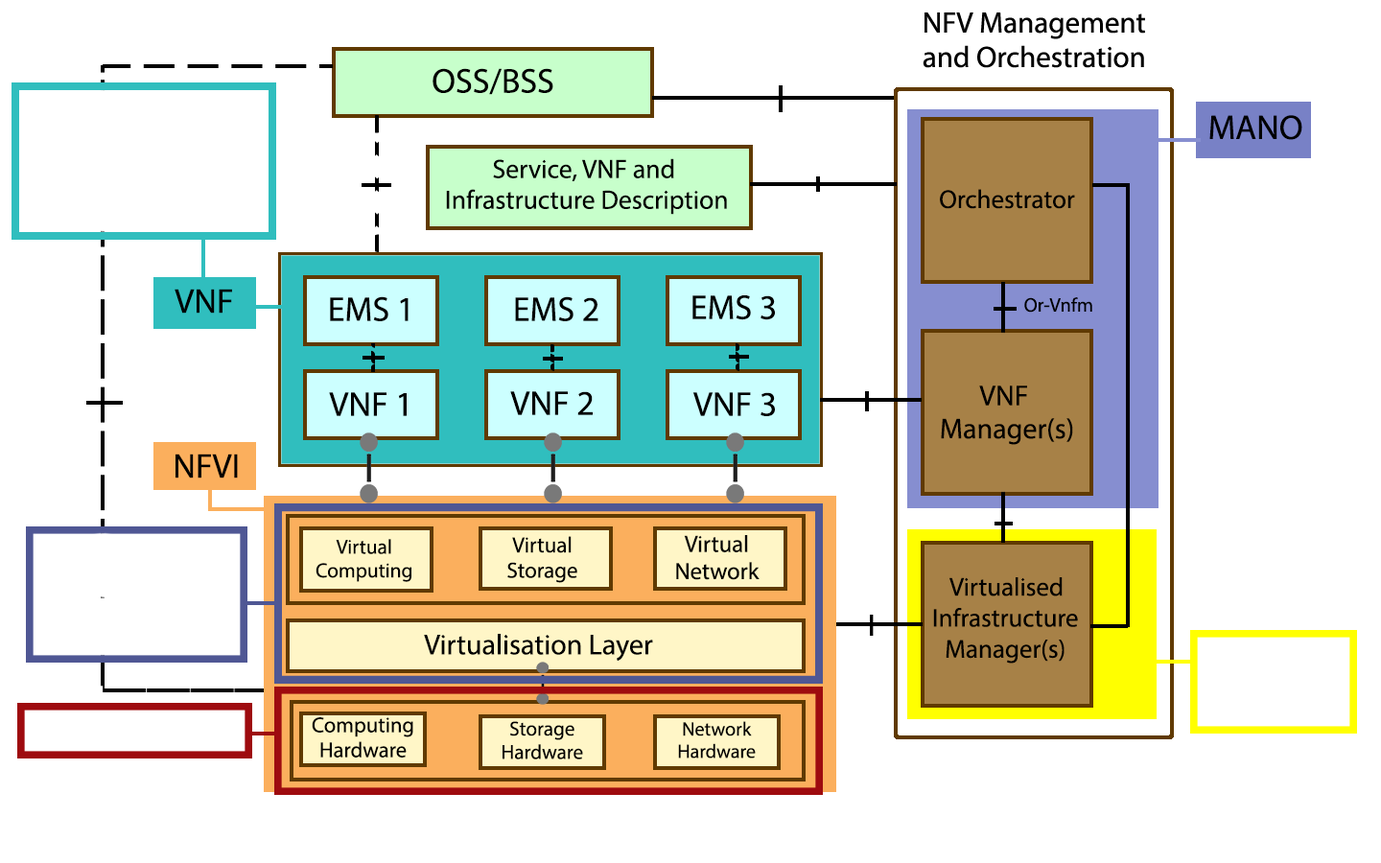
<style>
.page{position:relative;width:1381px;height:863px;background:#ffffff}
.page>*{position:absolute;margin:0}
.t1{font:29.7px "MyriadPro-Regular";color:#000000}
.t2{font:34.5px "MyriadPro-Regular";color:#000000}
.t3{font:26.5px "MyriadPro-Regular";color:#000000}
.t4{font:25.9px "MyriadPro-Regular";color:#000000}
.t5{font:19.7px "MyriadPro-Regular";color:#000000}
.t6{font:28.8px "MyriadPro-Regular";color:#000000}
.t7{font:20.5px "MyriadPro-Regular";color:#000000}
.t8{font:22px "MyriadPro-Regular";color:#000000}
.t9{font:23.6px "MyriadPro-Regular";color:#000000}
.t10{font:25.8px "MyriadPro-Regular";color:#000000}
.t11{font:21.6px "MyriadPro-Regular";color:#000000}
.t12{font:20.3px "MyriadPro-Regular";color:#000000}
.t13{font:19.3px "MyriadPro-Regular";color:#000000}
</style>
<div class="page">
<p class="t1" style="left:923px;top:12px;width:222px;height:56px;text-align:center">NFV Management<br>and Orchestration</p>
<p class="t2" style="left:433px;top:68px;width:120px;height:27px">OSS/BSS</p>
<p class="t2" style="left:1210px;top:115px;width:93px;height:25px">MANO</p>
<p class="t3" style="left:446px;top:158px;width:281px;height:57px;text-align:center">Service, VNF and <br>Infrastructure Description</p>
<p class="t4" style="left:940px;top:189px;width:135px;height:20px">Orchestrator</p>
<p class="t2" style="left:175px;top:289px;width:57px;height:25px">VNF</p>
<p class="t2" style="left:330px;top:296px;width:79px;height:25px">EMS 1</p>
<p class="t2" style="left:515px;top:296px;width:84px;height:25px">EMS 2</p>
<p class="t2" style="left:693px;top:295px;width:82px;height:25px">EMS 3</p>
<p class="t5" style="left:1024px;top:297px;width:69px;height:16px">Or-Vnfm</p>
<p class="t6" style="left:941px;top:386px;width:132px;height:59px;text-align:center">VNF <br>Manager(s)</p>
<p class="t2" style="left:329px;top:392px;width:78px;height:24px">VNF 1</p>
<p class="t2" style="left:510px;top:391px;width:83px;height:24px">VNF 2</p>
<p class="t2" style="left:693px;top:392px;width:82px;height:24px">VNF 3</p>
<p class="t2" style="left:176px;top:454px;width:62px;height:25px">NFVI</p>
<p class="t7" style="left:316px;top:539px;width:96px;height:43px;text-align:center">Virtual<br>Computing</p>
<p class="t8" style="left:507px;top:536px;width:70px;height:47px;text-align:center">Virtual<br>Storage</p>
<p class="t9" style="left:676px;top:535px;width:84px;height:45px;text-align:center">Virtual<br>Network</p>
<p class="t10" style="left:933px;top:577px;width:145px;height:87px;text-align:center">Virtualised Infrastructure Manager(s)</p>
<p class="t6" style="left:424px;top:634px;width:229px;height:27px">Virtualisation Layer</p>
<p class="t11" style="left:312px;top:717px;width:101px;height:41px;text-align:center">Computing<br>Hardware</p>
<p class="t12" style="left:503px;top:721px;width:80px;height:39px;text-align:center">Storage<br>Hardware</p>
<p class="t13" style="left:678px;top:721px;width:78px;height:38px;text-align:center">Network<br>Hardware</p>
</div>
